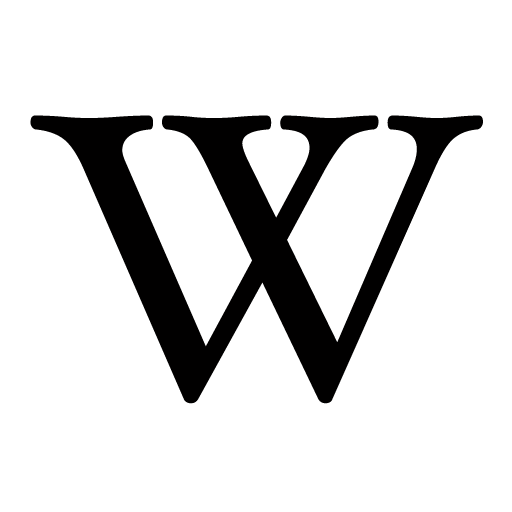
<style>
.page{position:relative;width:512px;height:512px;background:#ffffff}
.page>*{position:absolute;margin:0}
.t1{font:400px "HoeflerText-Regular";letter-spacing:-0.025em;color:#010000;font-weight:bold}
</style>
<div class="page">
<p class="t1" style="left:30px;top:115px;width:453px;height:289px">W</p>
</div>
